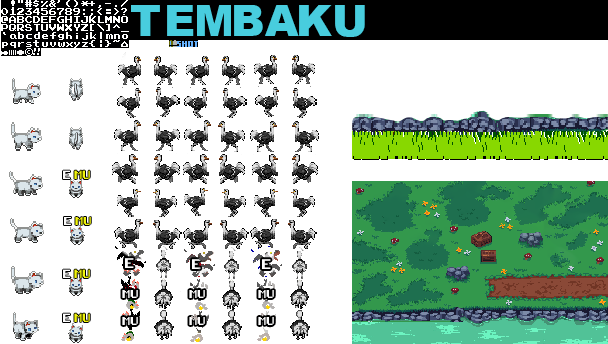
<style>
.page{position:relative;width:608px;height:344px;background:#ffffff}
.page>*{position:absolute;margin:0}
.t1{font:43px "Arial-Black";color:#48cdde}
.t2{font:7px "8-bit-pusab";color:#f0f30d}
.t3{font:7px "8-bit-pusab";color:#fcfcfc}
.t4{font:6.9px "8-bit-pusab";color:#f0f30d}
.t5{font:6.9px "8-bit-pusab";color:#fcfcfc}
.t6{font:8.3px "8-bit-pusab";color:#fcfcfc}
</style>
<div class="page">
<p class="t1" style="left:131px;top:5px;width:29px;height:31px">T</p>
<p class="t1" style="left:167px;top:5px;width:27px;height:31px">E</p>
<p class="t1" style="left:234px;top:5px;width:29px;height:31px">B</p>
<p class="t1" style="left:265px;top:5px;width:34px;height:31px">A</p>
<p class="t1" style="left:299px;top:5px;width:33px;height:31px">K</p>
<p class="t1" style="left:335px;top:5px;width:30px;height:32px">U</p>
<p class="t2" style="left:63px;top:170px;width:27px;height:9px"><span class="t3">E </span>MU</p>
<p class="t4" style="left:64px;top:217px;width:27px;height:8px"><span class="t5">E </span>MU</p>
<p class="t2" style="left:63px;top:269px;width:27px;height:9px"><span class="t3">E </span>MU</p>
<p class="t6" style="left:125px;top:258px;width:9px;height:10px">E</p>
<p class="t6" style="left:192px;top:259px;width:9px;height:10px">E</p>
<p class="t6" style="left:262px;top:259px;width:9px;height:10px">E</p>
<p class="t5" style="left:122px;top:290px;width:16px;height:8px">MU</p>
<p class="t5" style="left:189px;top:290px;width:16px;height:8px">MU</p>
<p class="t5" style="left:258px;top:290px;width:16px;height:8px">MU</p>
<p class="t2" style="left:63px;top:313px;width:27px;height:9px"><span class="t3">E </span>MU</p>
<p class="t5" style="left:122px;top:317px;width:16px;height:8px">MU</p>
<p class="t5" style="left:189px;top:317px;width:16px;height:8px">MU</p>
<p class="t5" style="left:258px;top:317px;width:16px;height:8px">MU</p>
</div>
